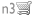
<style>
.page{position:relative;width:32px;height:16px;background:#ffffff}
.page>*{position:absolute;margin:0}
.t1{font:15.4px "GillSansMT";color:#8f8e8e;scale:0.91 1}
</style>
<div class="page">
<p class="t1" style="left:2px;top:2px;width:13px;height:12px">n3</p>
</div>
